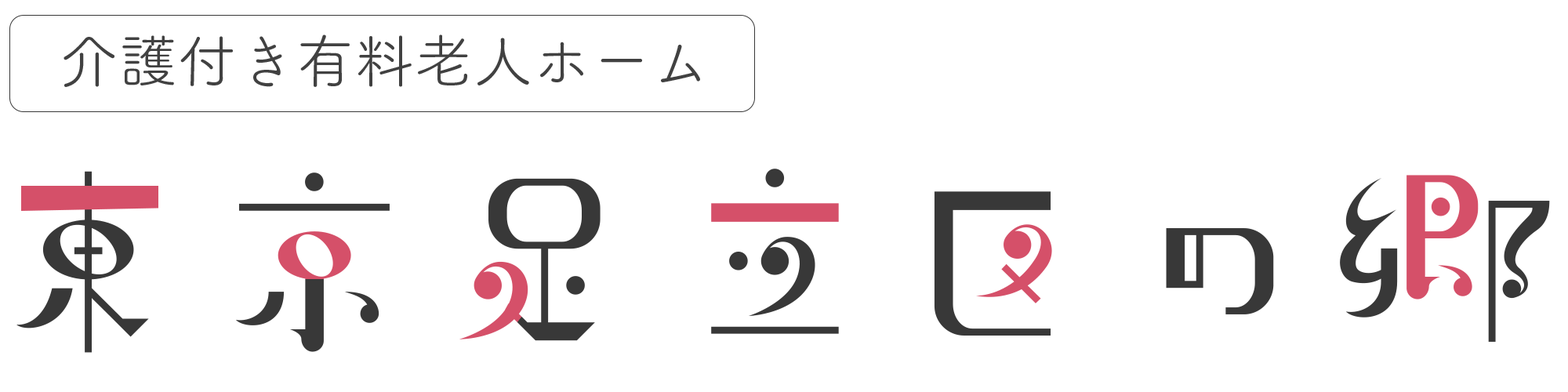
<style>
.page{position:relative;width:1568px;height:392px;background:#ffffff}
.page>*{position:absolute;margin:0}
.t1{font:59.1px "TsukuARdGothicStd-R";color:#414141}
.t2{font:230.3px "AB-andante";color:#383838}
.t3{font:230.3px "AB-andante"}
</style>
<div class="page">
<p class="t1" style="left:64px;top:34px;width:636px;height:53px">介護付き有料老人ホーム</p>
<p class="t2" style="left:16px;top:171px;width:138px;height:182px">東</p>
<p class="t2" style="left:235px;top:172px;width:155px;height:180px">京</p>
<p class="t3" style="left:711px;top:169px;width:128px;height:165px">立</p>
<p class="t2" style="left:459px;top:178px;width:142px;height:163px">足</p>
<p class="t3" style="left:1340px;top:175px;width:210px;height:167px">郷</p>
<p class="t2" style="left:934px;top:191px;width:118px;height:145px">区</p>
<p class="t2" style="left:1166px;top:228px;width:108px;height:86px">の</p>
</div>
